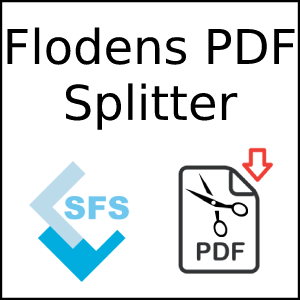
<style>
.page{position:relative;width:300px;height:300px;background:#ffffff}
.page>*{position:absolute;margin:0}
.t1{font:48px "DejaVuSans";color:#000000}
</style>
<div class="page">
<p class="t1" style="left:7px;top:27px;width:288px;height:103px;text-align:center">Flodens PDF<br>Splitter</p>
</div>
